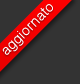
<style>
.page{position:relative;width:80px;height:84px;background:#333333}
.page>*{position:absolute;margin:0}
.t1{font:14px "Helvetica";letter-spacing:0.02em;color:#ffffff}
</style>
<div class="page">
<p class="t1" style="left:2px;top:4px;width:51px;height:51px;rotate:-45deg">aggiornato</p>
</div>
